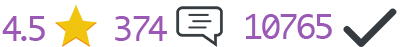
<style>
.page{position:relative;width:400px;height:47px;background:#ffffff}
.page>*{position:absolute;margin:0}
.t1{font:33px "Monaco";letter-spacing:-0.22em;color:#9b59b6}
.t2{font:33px "Monaco";letter-spacing:-0.061em;color:#9b59b6}
</style>
<div class="page">
<p class="t1" style="left:2px;top:16px;width:43px;height:25px">4.5</p>
<p class="t2" style="left:115px;top:16px;width:52px;height:25px">374</p>
<p class="t2" style="left:246px;top:14px;width:86px;height:25px">10765</p>
</div>
